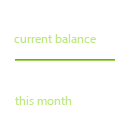
<style>
.page{position:relative;width:130px;height:122px;background:#ffffff}
.page>*{position:absolute;margin:0}
.t1{font:12px "SegoeUI";color:#bfe881}
</style>
<div class="page">
<p class="t1" style="left:14px;top:34px;width:82px;height:9px">current balance</p>
<p class="t1" style="left:15px;top:96px;width:57px;height:9px">this month</p>
</div>
